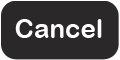
<style>
.page{position:relative;width:120px;height:60px;background:#2a2828}
.page>*{position:absolute;margin:0}
.t1{font:26px "ArialRoundedMTBold";color:#ffffff}
</style>
<div class="page">
<p class="t1" style="left:15px;top:19px;width:87px;height:19px">Cancel</p>
</div>
